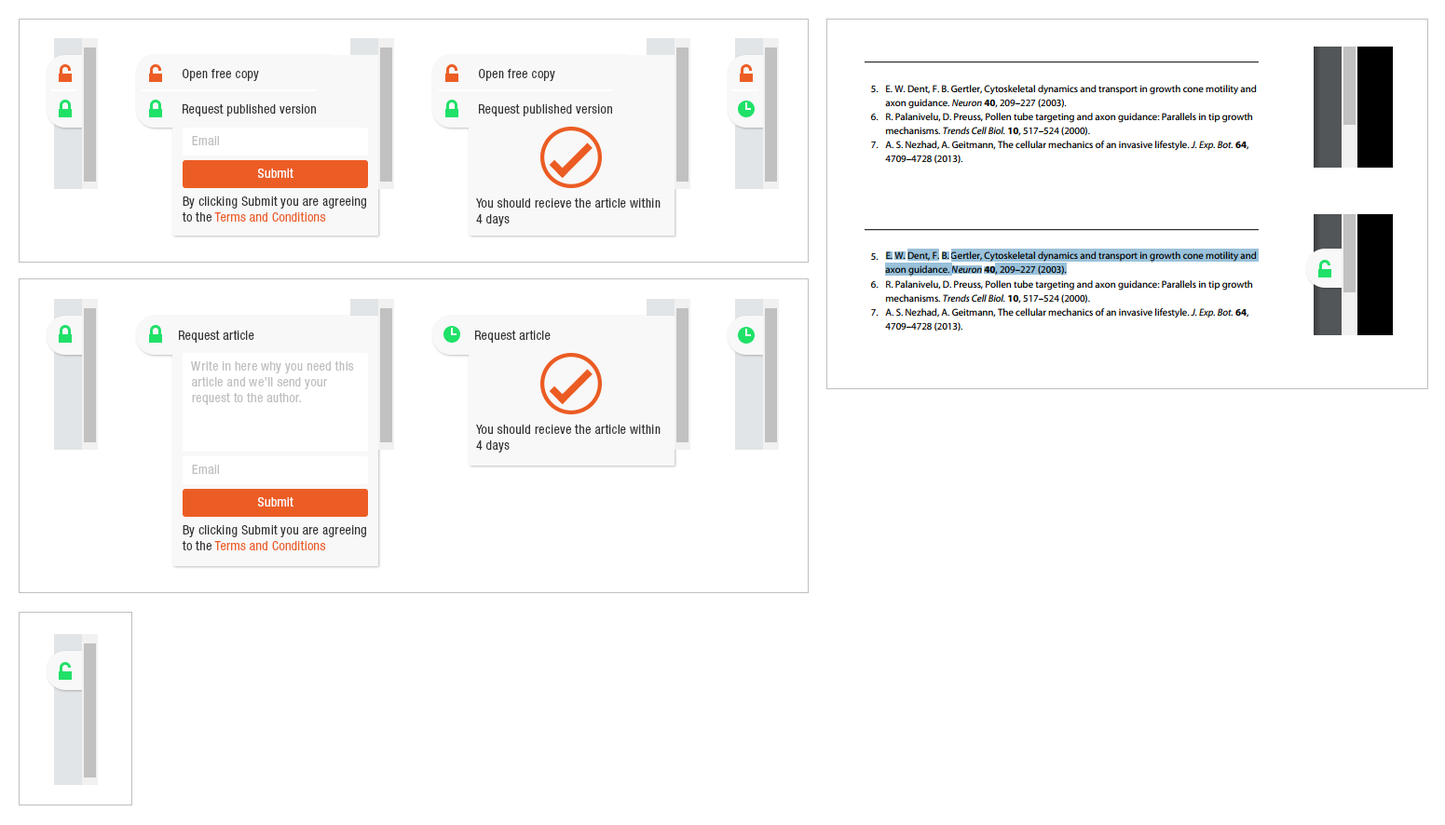
<style>
.page{position:relative;width:1445px;height:825px;background:#ffffff}
.page>*{position:absolute;margin:0}
.t1{font:13px "HelveticaNeueLTPro-Cn";letter-spacing:0.025em;color:#333333}
.t2{font:13px "HelveticaNeueLTPro-Cn";letter-spacing:0.025em;color:#bfbfbf}
.t3{font:13px "HelveticaNeueLTPro-Cn";letter-spacing:0.025em;color:#ffffff}
.t4{font:13px "HelveticaNeueLTPro-Cn";letter-spacing:0.025em;color:#ec5d25}
</style>
<div class="page">
<p class="t1" style="left:183px;top:69px;width:76px;height:12px">Open free copy</p>
<p class="t1" style="left:479px;top:69px;width:76px;height:12px">Open free copy</p>
<p class="t1" style="left:183px;top:104px;width:133px;height:12px">Request published version</p>
<p class="t1" style="left:479px;top:104px;width:133px;height:12px">Request published version</p>
<p class="t2" style="left:192px;top:136px;width:27px;height:9px">Email</p>
<p class="t3" style="left:258px;top:169px;width:35px;height:9px">Submit</p>
<p class="t1" style="left:182px;top:197px;width:184px;height:26px">By clicking Submit you are agreeing to the <span class="t4">Terms and Conditions</span></p>
<p class="t1" style="left:476px;top:198px;width:184px;height:28px">You should recieve the article within 4 days</p>
<p class="t1" style="left:179px;top:331px;width:75px;height:12px">Request article</p>
<p class="t1" style="left:475px;top:331px;width:76px;height:12px">Request article</p>
<p class="t2" style="left:191px;top:361px;width:163px;height:44px">Write in here why you need this article and we’ll send your request to the author.</p>
<p class="t1" style="left:476px;top:425px;width:184px;height:28px">You should recieve the article within 4 days</p>
<p class="t2" style="left:192px;top:465px;width:27px;height:9px">Email</p>
<p class="t3" style="left:258px;top:497px;width:35px;height:10px">Submit</p>
<p class="t1" style="left:182px;top:525px;width:184px;height:26px">By clicking Submit you are agreeing to the <span class="t4">Terms and Conditions</span></p>
</div>
